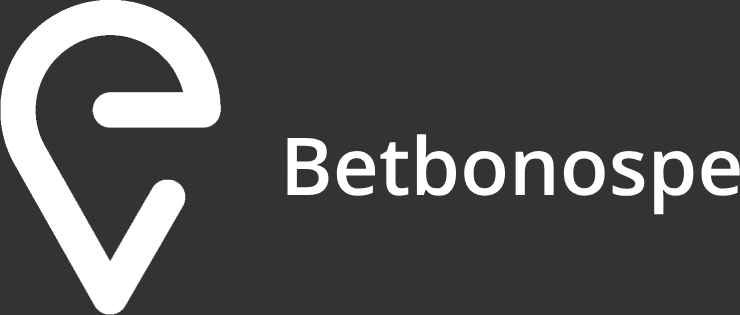
<style>
.page{position:relative;width:740px;height:315px;background:#333333}
.page>*{position:absolute;margin:0}
.t1{font:80px "OpenSans-Semibold";color:#ffffff}
</style>
<div class="page">
<p class="t1" style="left:287px;top:134px;width:453px;height:81px">Betbonospe</p>
</div>
